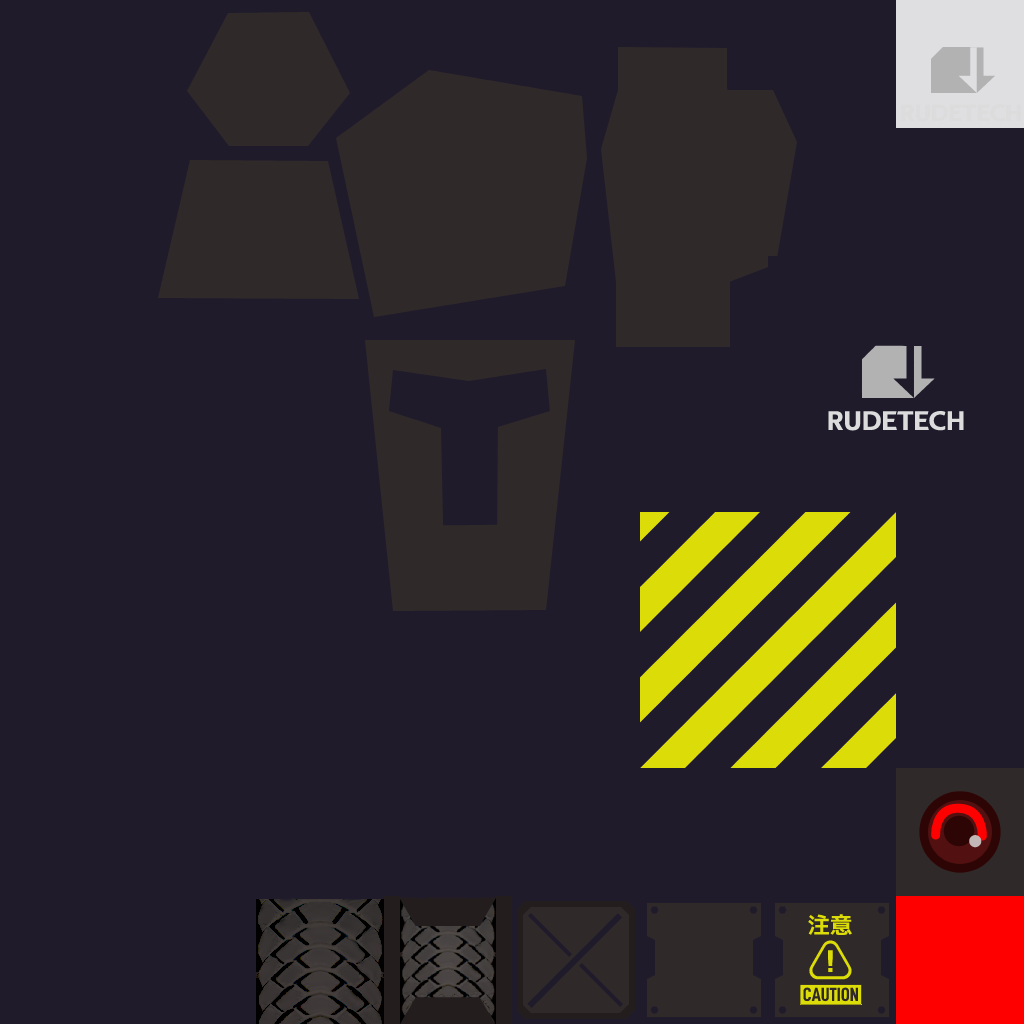
<style>
.page{position:relative;width:1024px;height:1024px;background:#1f1b2b}
.page>*{position:absolute;margin:0}
.t1{font:24px "TechnaSans-Regular";color:#dcdcdc;text-transform:uppercase;font-weight:bold}
.t2{font:27.2px "TechnaSans-Regular";color:#dcdcdc;text-transform:uppercase;font-weight:bold}
.t3{font:22.4px "mplus-1c-bold";color:#dcdc08;text-transform:uppercase}
.t4{font:19.2px "D-DINCondensed-Bold";color:#302929;text-transform:uppercase}
</style>
<div class="page">
<p class="t1" style="left:901px;top:104px;width:120px;height:18px">rudetech</p>
<p class="t2" style="left:828px;top:411px;width:136px;height:20px">rudetech</p>
<p class="t3" style="left:808px;top:914px;width:44px;height:21px">注意</p>
<p class="t4" style="left:803px;top:987px;width:55px;height:15px">caution</p>
</div>
